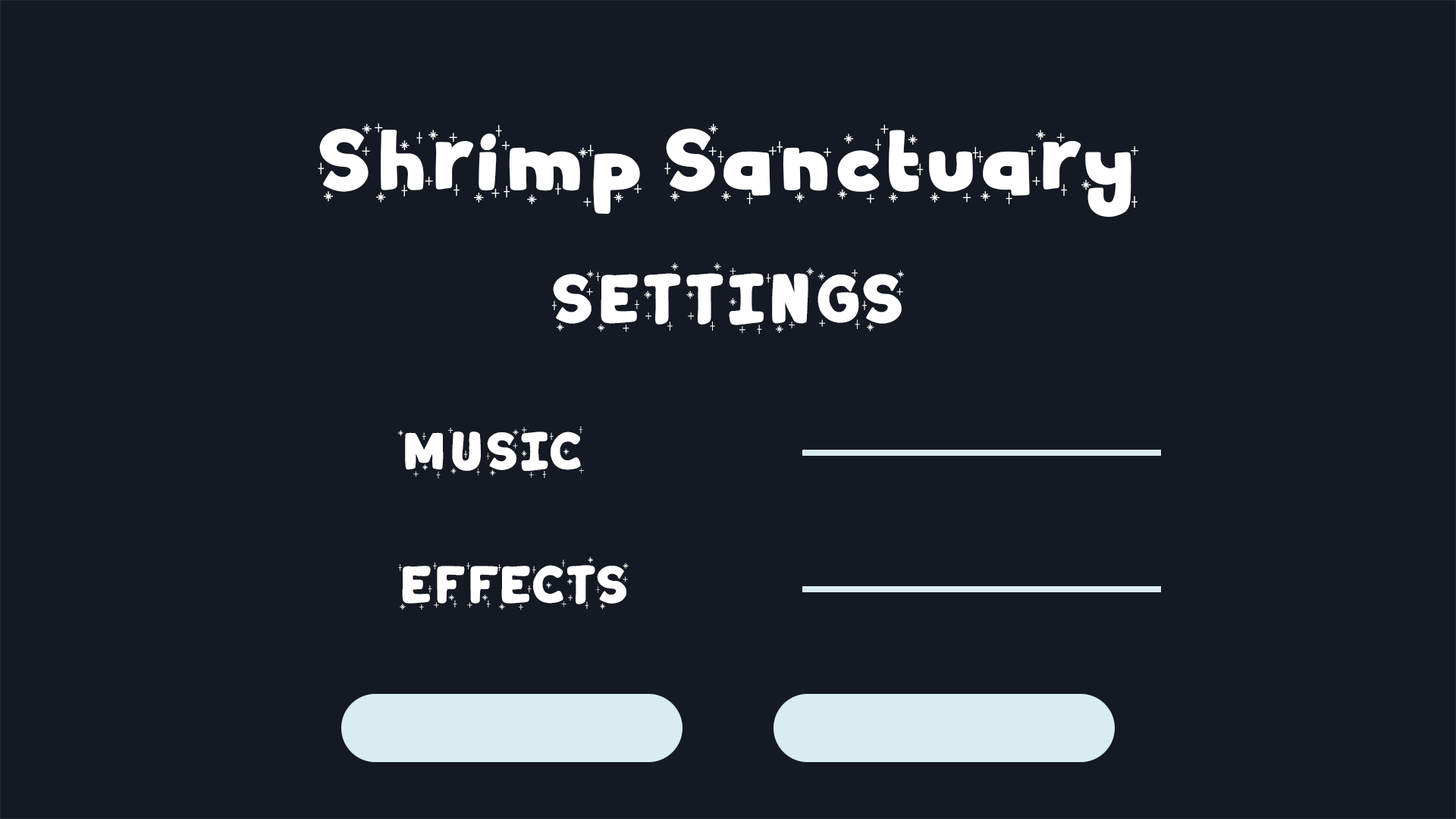
<style>
.page{position:relative;width:1456px;height:819px;background:#141923}
.page>*{position:absolute;margin:0}
.t1{font:79.6px "WinterDairy-Shiny";color:#ffffff}
.t2{font:62.6px "WinterDairy-Shiny";color:#ffffff}
.t3{font:47.8px "WinterDairy-Shiny";color:#ffffff}
</style>
<div class="page">
<p class="t1" style="left:318px;top:123px;width:821px;height:94px">Shrimp Sanctuary</p>
<p class="t2" style="left:552px;top:262px;width:352px;height:72px">SETTINGS</p>
<p class="t3" style="left:397px;top:426px;width:187px;height:53px">MUSIC</p>
<p class="t3" style="left:398px;top:557px;width:231px;height:53px">EFFECTS</p>
</div>
